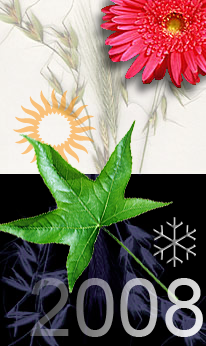
<style>
.page{position:relative;width:206px;height:346px}
.page>*{position:absolute;margin:0}
.t1{font:80px "ArialMT"}
</style>
<div class="page">
<p class="t1" style="left:30px;top:278px;width:173px;height:59px">2008</p>
</div>
